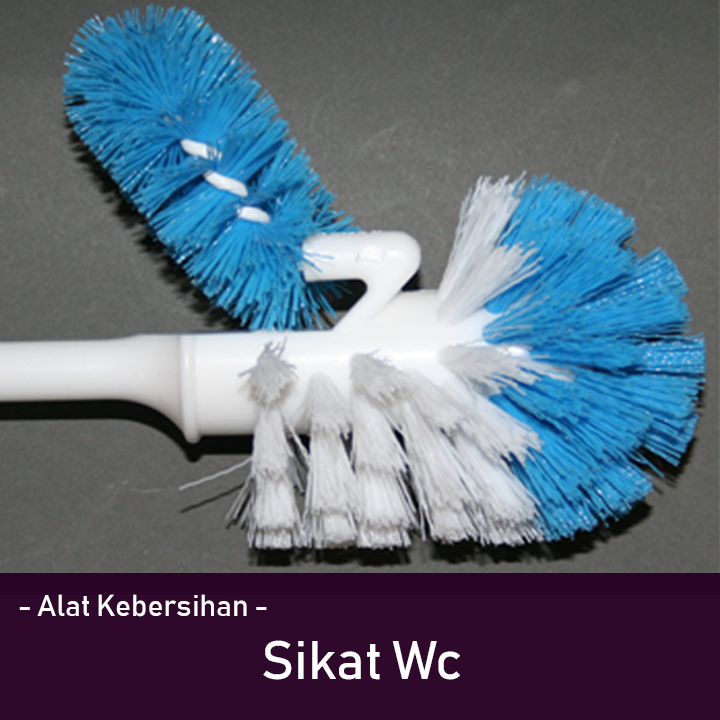
<style>
.page{position:relative;width:720px;height:720px}
.page>*{position:absolute;margin:0}
.t1{font:30px "Bahnschrift";color:#ffffff}
.t2{font:53.6px "Bahnschrift";color:#ffffff}
</style>
<div class="page">
<p class="t1" style="left:19px;top:594px;width:248px;height:23px">- Alat Kebersihan -</p>
<p class="t2" style="left:263px;top:640px;width:197px;height:40px">Sikat Wc</p>
</div>
